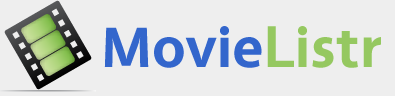
<style>
.page{position:relative;width:395px;height:96px;background:#eeeeee}
.page>*{position:absolute;margin:0}
.t1{font:60px "Vegur-Bold";color:#3366cc}
.t2{font:60px "Vegur-Bold";color:#95c860}
</style>
<div class="page">
<p class="t1" style="left:104px;top:26px;width:277px;height:42px">Movie<span class="t2">Listr</span></p>
</div>
